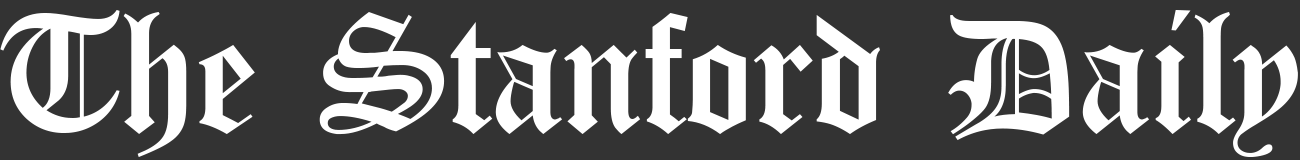
<style>
.page{position:relative;width:1300px;height:160px;background:#333333}
.page>*{position:absolute;margin:0}
.t1{font:176px "Canterbury-Regular";color:#ffffff}
</style>
<div class="page">
<p class="t1" style="left:0px;top:10px;width:1298px;height:147px">The Stanford Daily</p>
</div>
